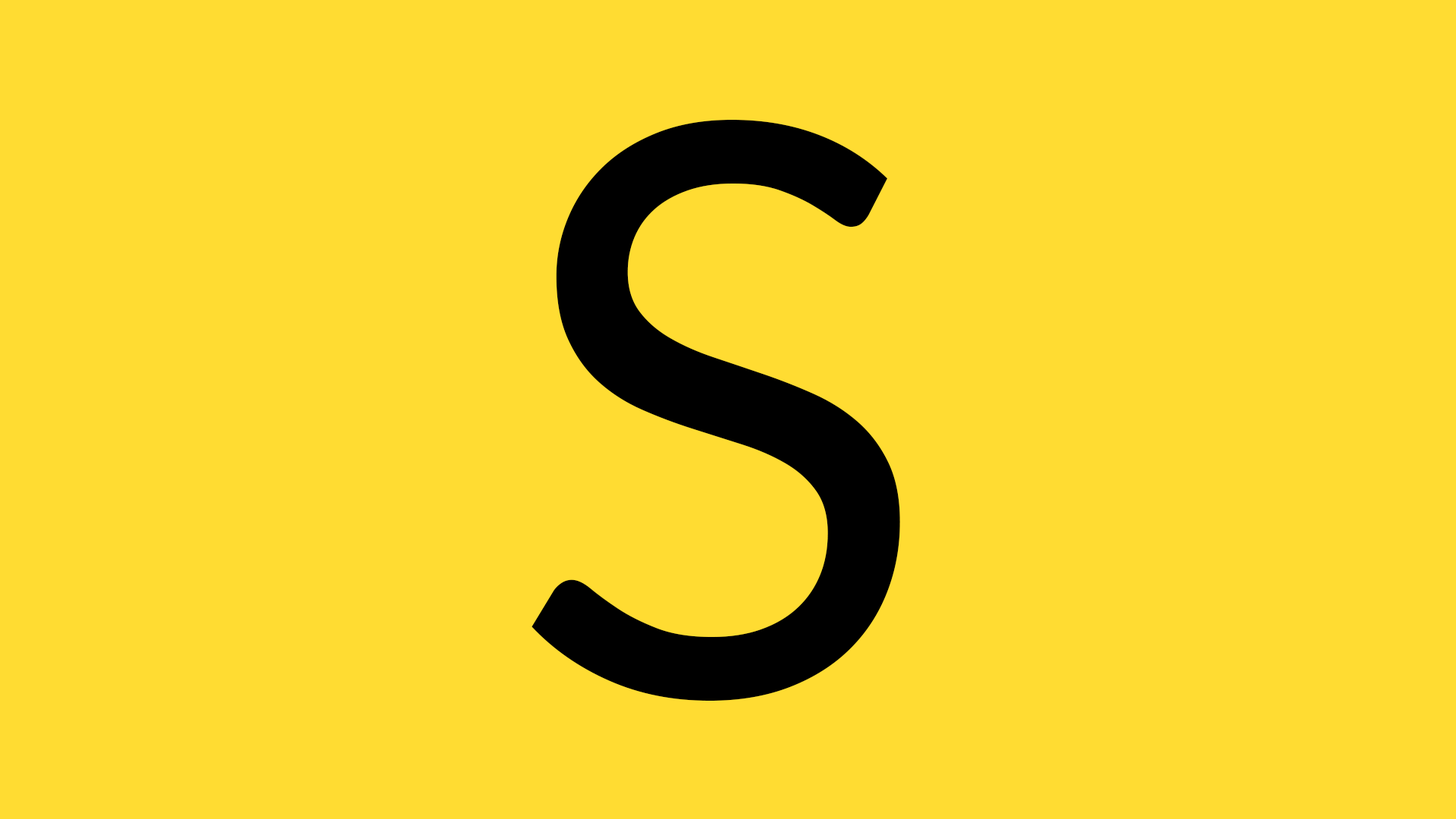
<style>
.page{position:relative;width:1456px;height:819px;background:#ffdc32}
.page>*{position:absolute;margin:0}
.t1{font:792.1px "Lato-Regular";color:#000000}
</style>
<div class="page">
<p class="t1" style="left:532px;top:120px;width:368px;height:581px">S</p>
</div>
